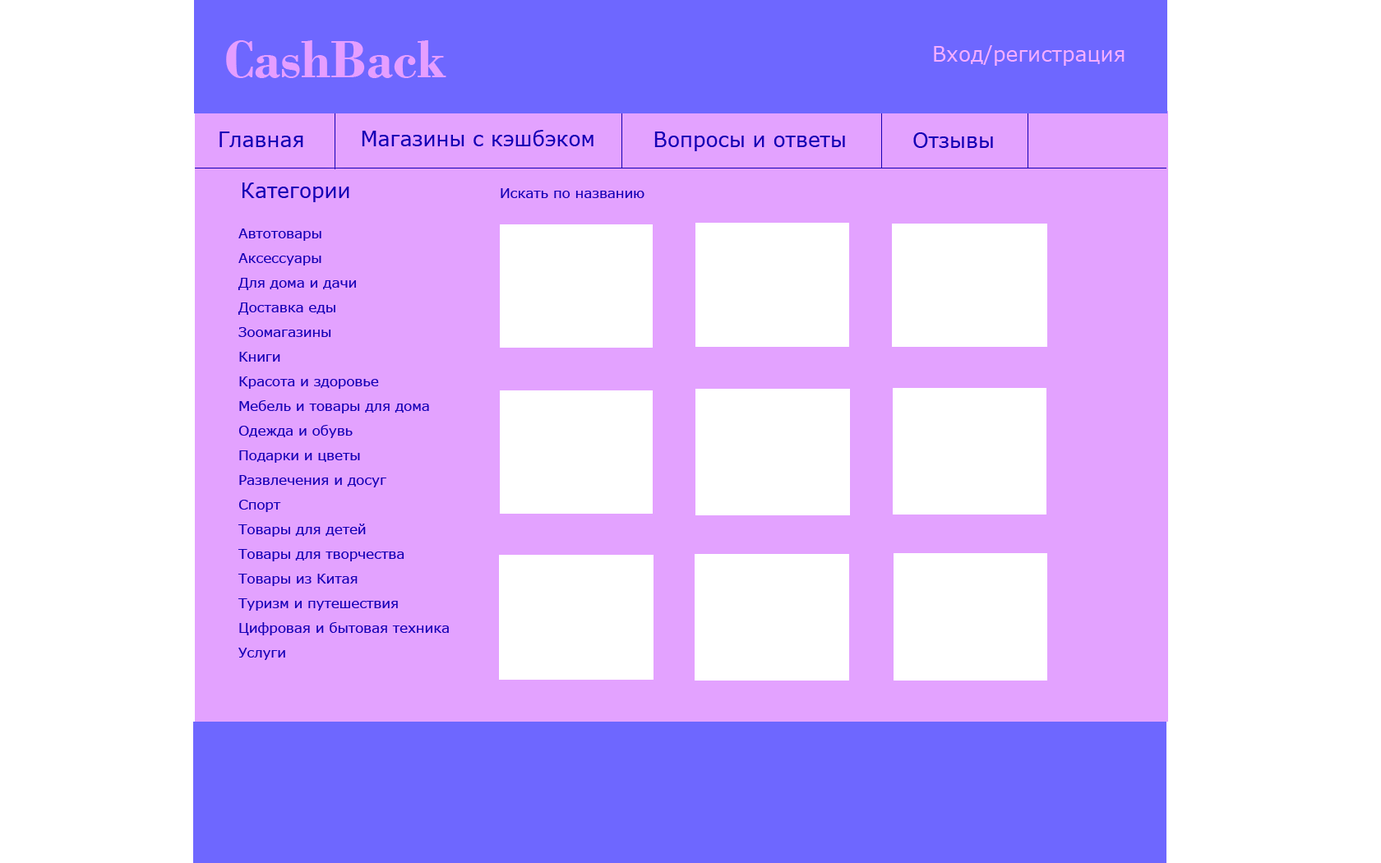
<style>
.page{position:relative;width:1381px;height:863px;background:#ffffff}
.page>*{position:absolute;margin:0}
.t1{font:54.8px "BodoniMT-Bold";color:#e59eff}
.t2{font:20.6px "MSReferenceSansSerif";color:#f5aeff}
.t3{font:20.6px "MSReferenceSansSerif";color:#1600b6}
.t4{font:13.7px "MSReferenceSansSerif";color:#1600b6}
</style>
<div class="page">
<p class="t1" style="left:226px;top:40px;width:220px;height:38px">CashBack</p>
<p class="t2" style="left:934px;top:45px;width:191px;height:21px">Вход/регистрация</p>
<p class="t3" style="left:220px;top:132px;width:83px;height:15px">Главная</p>
<p class="t3" style="left:362px;top:130px;width:232px;height:16px">Магазины с кэшбэком</p>
<p class="t3" style="left:654px;top:132px;width:191px;height:19px">Вопросы и ответы</p>
<p class="t3" style="left:913px;top:132px;width:80px;height:16px">Отзывы</p>
<p class="t3" style="left:243px;top:183px;width:106px;height:19px">Категории</p>
<p class="t4" style="left:501px;top:188px;width:144px;height:10px">Искать по названию</p>
<p class="t4" style="left:238px;top:229px;width:211px;height:431px">Автотовары<br><br>Аксессуары<br><br>Для дома и дачи<br><br>Доставка еды<br><br>Зоомагазины<br><br>Книги<br><br>Красота и здоровье<br><br>Мебель и товары для дома<br><br>Одежда и обувь<br><br>Подарки и цветы<br><br>Развлечения и досуг<br><br>Спорт<br><br>Товары для детей<br><br>Товары для творчества<br><br>Товары из Китая<br><br>Туризм и путешествия<br><br>Цифровая и бытовая техника<br><br>Услуги</p>
</div>
